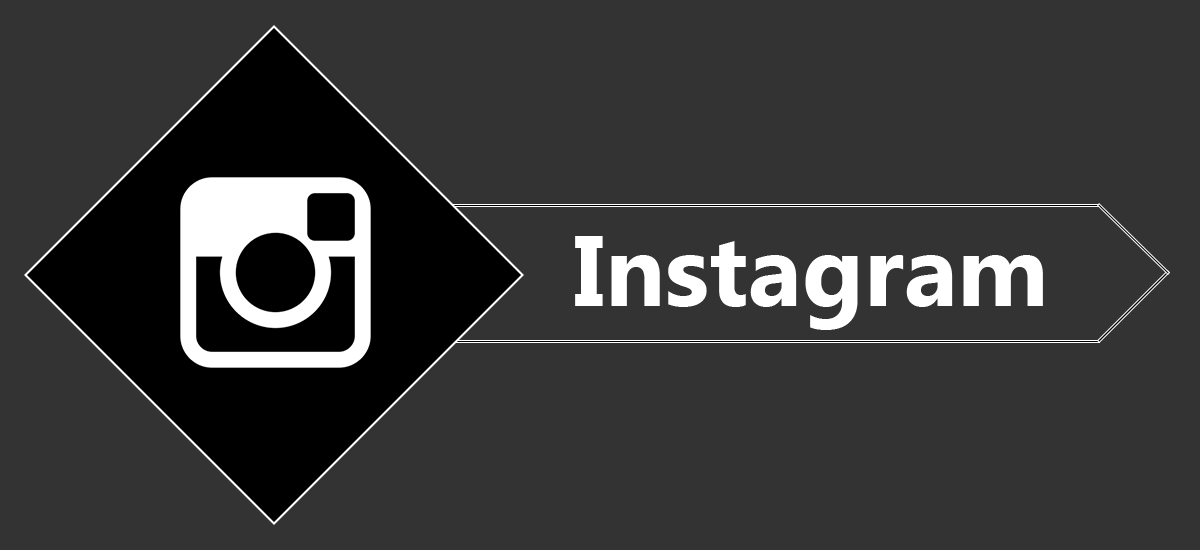
<style>
.page{position:relative;width:1200px;height:550px;background:#333333}
.page>*{position:absolute;margin:0}
.t1{font:100px "KhmerUI-Bold";color:#ffffff}
</style>
<div class="page">
<p class="t1" style="left:575px;top:236px;width:468px;height:94px">Instagram</p>
</div>
